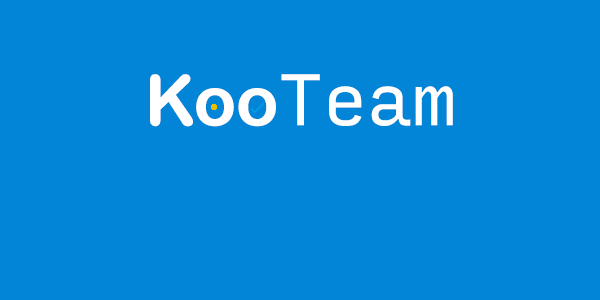
<style>
.page{position:relative;width:600px;height:300px;background:#0285d7}
.page>*{position:absolute;margin:0}
.t1{font:70px "InputMono-Regular";color:#ffffff}
.t2{font:70px "ArialRoundedMTBold";color:#ffffff}
</style>
<div class="page">
<p class="t1" style="left:150px;top:74px;width:303px;height:53px"><span class="t2">Koo</span>Team</p>
</div>
